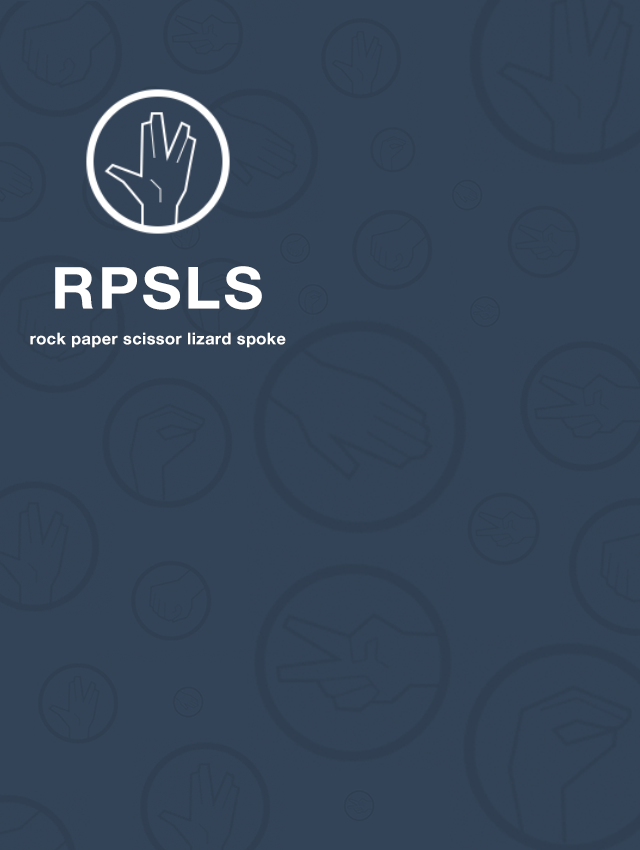
<style>
.page{position:relative;width:640px;height:850px;background:#344458}
.page>*{position:absolute;margin:0}
.t1{font:58px "HelveticaNeue-Bold";letter-spacing:0.05em;color:#ffffff;scale:1.05 1}
.t2{font:16px "HelveticaNeue-Bold";letter-spacing:0.025em;color:#ffffff}
</style>
<div class="page">
<p class="t1" style="left:55px;top:266px;width:207px;height:44px">RPSLS</p>
<p class="t2" style="left:30px;top:332px;width:256px;height:16px">rock paper scissor lizard spoke</p>
</div>
